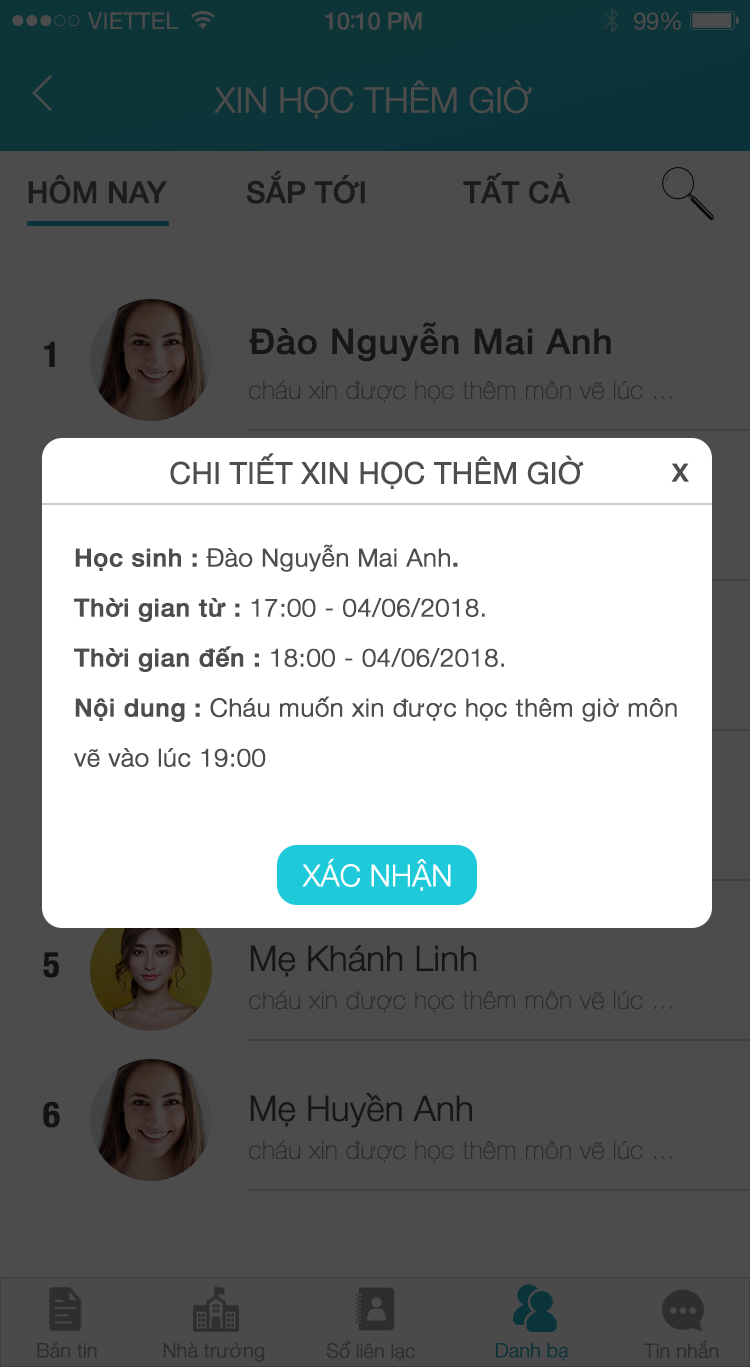
<style>
.page{position:relative;width:750px;height:1367px;background:#4c4c4c}
.page>*{position:absolute;margin:0}
.t1{font:23px "HelveticaNeue";letter-spacing:0.02em;color:#4c4c4c}
.t2{font:24px "HelveticaNeue-Medium";letter-spacing:-0.02em;color:#4c4c4c}
.t3{font:26px "MyriadPro-Regular";letter-spacing:-0.02em;color:#4c4c4c}
.t4{font:24px "HelveticaNeue";letter-spacing:-0.02em;color:#4c4c4c}
.t5{font:35px "HelveticaNeue-Light";letter-spacing:-0.02em;color:#4c4c4c;font-weight:bold}
.t6{font:30px "HelveticaNeue-Medium";letter-spacing:-0.02em;color:#1c1c1c;font-weight:bold}
.t7{font:35px "HelveticaNeue-Medium";letter-spacing:0.01em;color:#171717;font-weight:bold}
.t8{font:35px "HelveticaNeue-CondensedBold";letter-spacing:0.01em;color:#131313;font-weight:bold}
.t9{font:25px "HelveticaNeue-UltraLight";letter-spacing:0.01em;color:#2c2c2c;font-weight:bold}
.t10{font:30px "HelveticaNeue";letter-spacing:-0.02em;color:#4d4d4d;font-weight:bold}
.t11{font:25px "HelveticaNeue-Medium";letter-spacing:0.01em;color:#4d4d4d;font-weight:bold}
.t12{font:25px/50px "HelveticaNeue-Light";letter-spacing:0.01em;color:#4d4d4d;font-weight:bold}
.t13{font:25px/50px "HelveticaNeue-Medium";letter-spacing:0.01em;color:#4d4d4d;font-weight:bold}
.t14{font:30px "HelveticaNeue-Light";letter-spacing:-0.02em;color:#ffffff;font-weight:bold}
.t15{font:35px "HelveticaNeue-Light";letter-spacing:-0.02em;color:#171717;font-weight:bold}
.t16{font:20px "HelveticaNeue-Light";letter-spacing:-0.02em;color:#2e2e2e;font-weight:bold}
.t17{font:20px "HelveticaNeue-Light";letter-spacing:-0.02em;color:#0b343a;font-weight:bold}
</style>
<div class="page">
<p class="t1" style="left:88px;top:12px;width:90px;height:17px">VIETTEL</p>
<p class="t2" style="left:325px;top:12px;width:97px;height:18px">10<span class="t3">:</span>10 PM</p>
<p class="t4" style="left:634px;top:12px;width:47px;height:18px">99%</p>
<p class="t5" style="left:214px;top:80px;width:318px;height:39px">XIN HỌC THÊM GIỜ</p>
<p class="t6" style="left:247px;top:170px;width:118px;height:34px">SẮP TỚI</p>
<p class="t6" style="left:463px;top:173px;width:108px;height:31px">TẤT CẢ</p>
<p class="t6" style="left:28px;top:175px;width:139px;height:29px">HÔM NAY</p>
<p class="t7" style="left:249px;top:322px;width:362px;height:40px">Đào Nguyễn Mai Anh</p>
<p class="t8" style="left:44px;top:341px;width:11px;height:26px">1</p>
<p class="t9" style="left:249px;top:380px;width:423px;height:23px">cháu xin được học thêm môn vẽ lúc ...</p>
<p class="t10" style="left:170px;top:453px;width:414px;height:36px">CHI TIẾT XIN HỌC THÊM GIỜ</p>
<p class="t11" style="left:671px;top:463px;width:18px;height:19px">X</p>
<p class="t12" style="left:74px;top:544px;width:603px;height:223px"><span class="t13">Học sinh : </span>Đào Nguyễn Mai Anh<span class="t13">.<br>Thời gian từ : </span>17:00 - 04/06/2018.<br><span class="t13">Thời gian đến : </span>18:00 - 04/06/2018.<br><span class="t13">Nội dung : </span>Cháu muốn xin được học thêm giờ môn<br>vẽ vào lúc 19:00</p>
<p class="t14" style="left:302px;top:858px;width:149px;height:33px">XÁC NHẬN</p>
<p class="t8" style="left:43px;top:952px;width:16px;height:26px">5</p>
<p class="t15" style="left:250px;top:945px;width:227px;height:32px">Mẹ Khánh Linh</p>
<p class="t9" style="left:249px;top:990px;width:423px;height:23px">cháu xin được học thêm môn vẽ lúc ...</p>
<p class="t15" style="left:250px;top:1092px;width:222px;height:36px">Mẹ Huyền Anh</p>
<p class="t8" style="left:43px;top:1101px;width:17px;height:27px">6</p>
<p class="t9" style="left:249px;top:1140px;width:423px;height:23px">cháu xin được học thêm môn vẽ lúc ...</p>
<p class="t16" style="left:37px;top:1342px;width:60px;height:16px">Bản tin</p>
<p class="t16" style="left:163px;top:1342px;width:102px;height:20px">Nhà trường</p>
<p class="t16" style="left:326px;top:1341px;width:90px;height:21px">Sổ liên lạc</p>
<p class="t17" style="left:496px;top:1343px;width:73px;height:18px">Danh bạ</p>
<p class="t16" style="left:643px;top:1340px;width:76px;height:19px">Tin nhắn</p>
</div>
